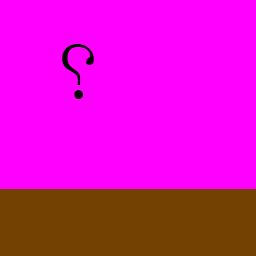
<style>
.page{position:relative;width:256px;height:256px;background:#ff00ff}
.page>*{position:absolute;margin:0}
.t1{font:80px "SimSun";color:#000000}
</style>
<div class="page">
<p class="t1" style="left:62px;top:44px;width:32px;height:55px;rotate:180deg">?</p>
</div>
